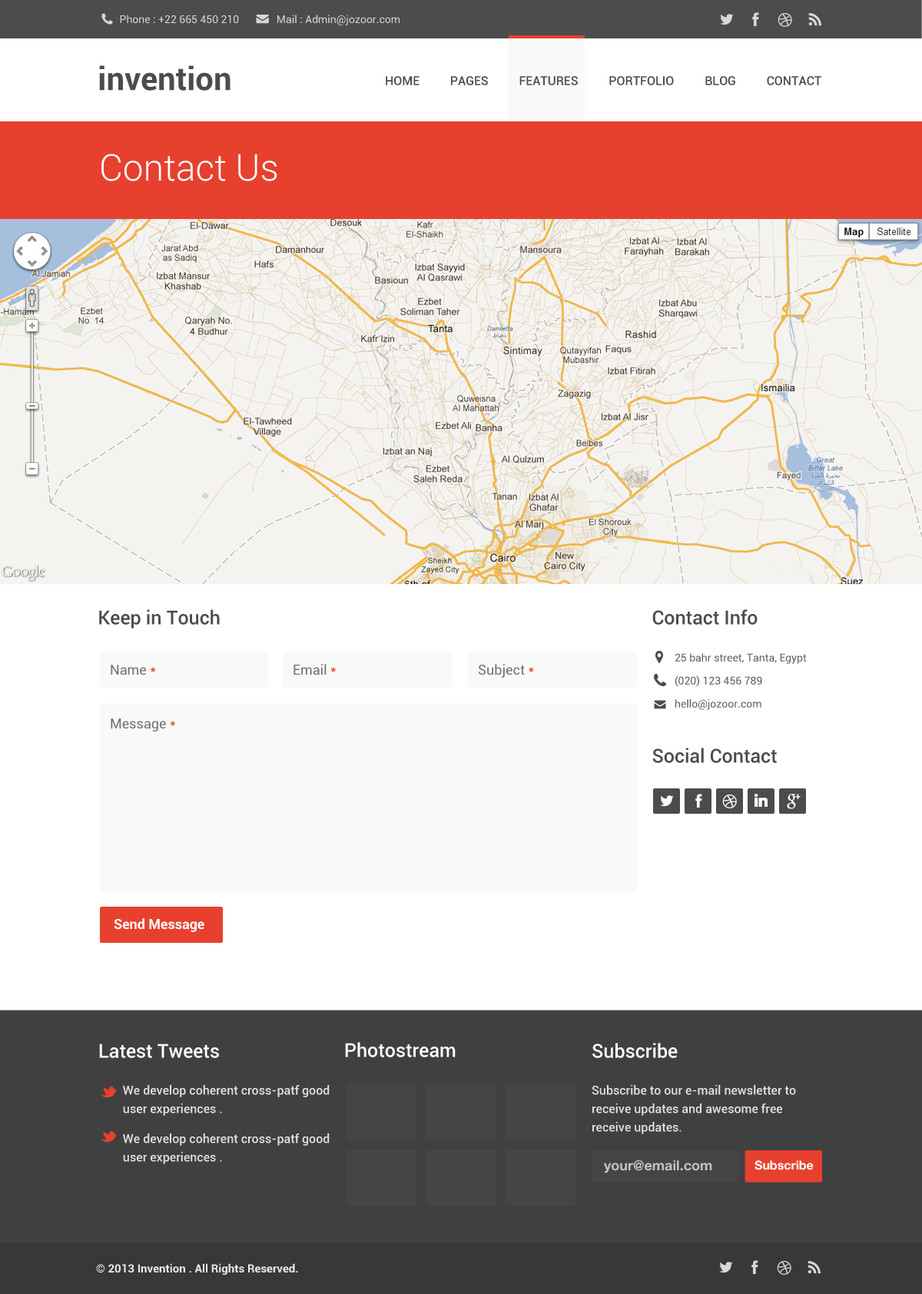
<style>
.page{position:relative;width:922px;height:1294px;background:#ffffff}
.page>*{position:absolute;margin:0}
.t1{font:10.8px "Roboto-Regular";color:#d7d7d7}
.t2{font:12.3px "Roboto-Medium";color:#4b4c4d}
.t3{font:36.9px "Roboto-Light";color:#ffffff}
.t4{font:19.2px "Roboto-Medium";color:#4b4c4d}
.t5{font:10.8px/23px "Roboto-Regular";color:#5c5d5e}
.t6{font:13.8px "Roboto-Regular";color:#717171}
.t7{font:13.8px "Roboto-Regular";color:#e7402f}
.t8{font:13.8px "Roboto-Bold";color:#ffffff}
.t9{font:12.3px/18.4px "Roboto-Medium";color:#e1e1e1}
.t10{font:19.2px/22px "Roboto-Medium";color:#ffffff}
.t11{font:19.2px "Roboto-Medium";color:#ffffff}
.t12{font:13.8px "HelveticaNeue-Bold";color:#c2c2c2}
.t13{font:12.3px "HelveticaNeue-Bold";color:#ffffff}
.t14{font:11.5px "Roboto-Bold";color:#eaeaea}
</style>
<div class="page">
<p class="t1" style="left:120px;top:15px;width:279px;height:10px">Phone : +22 665 450 210              Mail : Admin@jozoor.com</p>
<p class="t2" style="left:386px;top:76px;width:435px;height:9px">HOME          PAGES          FEATURES          PORTFOLIO          BLOG          CONTACT</p>
<p class="t3" style="left:101px;top:154px;width:176px;height:27px">Contact Us</p>
<p class="t4" style="left:99px;top:609px;width:121px;height:19px">Keep in Touch</p>
<p class="t4" style="left:652px;top:609px;width:105px;height:16px">Contact Info</p>
<p class="t5" style="left:675px;top:653px;width:132px;height:57px">25 bahr street, Tanta, Egypt<br>    (020) 123 456 789<br>    hello@jozoor.com</p>
<p class="t6" style="left:111px;top:664px;width:45px;height:11px">Name <span class="t7">*</span></p>
<p class="t6" style="left:293px;top:664px;width:43px;height:11px">Email <span class="t7">*</span></p>
<p class="t6" style="left:479px;top:664px;width:55px;height:14px">Subject <span class="t7">*</span></p>
<p class="t6" style="left:111px;top:718px;width:64px;height:13px">Message <span class="t7">*</span></p>
<p class="t4" style="left:652px;top:747px;width:125px;height:16px">Social Contact</p>
<p class="t8" style="left:114px;top:918px;width:90px;height:14px">Send Message</p>
<p class="t9" style="left:99px;top:1043px;width:231px;height:121px"><span class="t10">Latest Tweets<br><br><br><br>        </span>We develop coherent cross-patf good<br>        user experiences .<br><br>        We develop coherent cross-patf good<br>        user experiences .</p>
<p class="t11" style="left:345px;top:1042px;width:111px;height:15px">Photostream</p>
<p class="t9" style="left:591px;top:1042px;width:205px;height:92px"><span class="t10">Subscribe<br><br><br><br></span>Subscribe to our e-mail newsletter to<br>receive updates and awesome free<br>receive updates.</p>
<p class="t12" style="left:604px;top:1159px;width:108px;height:14px">your@email.com</p>
<p class="t13" style="left:754px;top:1160px;width:59px;height:10px">Subscribe</p>
<p class="t14" style="left:96px;top:1263px;width:202px;height:11px">© 2013 Invention . All Rights Reserved.</p>
</div>
